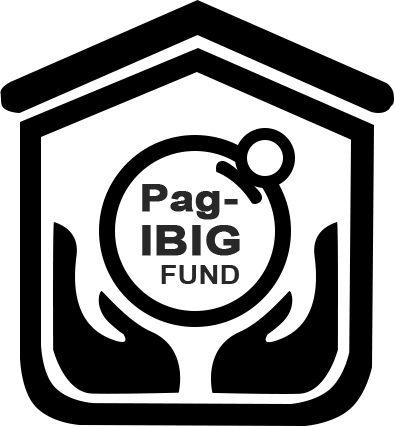
<style>
.page{position:relative;width:395px;height:427px;background:#ffffff}
.page>*{position:absolute;margin:0}
.t1{font:38.4px "Arial-BoldMT";color:#282828;font-weight:bold;scale:1.14 1}
.t2{font:42.5px "Arial-BoldMT";color:#282828;text-transform:uppercase;font-weight:bold;scale:1.14 1}
.t3{font:25.5px "Arial-BoldMT";color:#282828;text-transform:uppercase;scale:1.14 1}
</style>
<div class="page">
<p class="t1" style="left:142px;top:184px;width:96px;height:36px">Pag-</p>
<p class="t2" style="left:142px;top:225px;width:98px;height:31px">ibig</p>
<p class="t3" style="left:161px;top:265px;width:78px;height:19px">fund</p>
</div>
